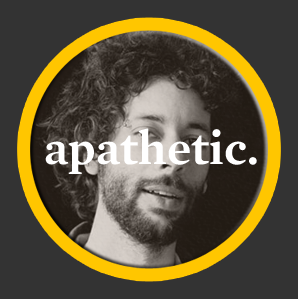
<style>
.page{position:relative;width:298px;height:299px;background:#333333}
.page>*{position:absolute;margin:0}
.t1{font:48px "MercuryTextG1-Semibold";color:#ffffff}
</style>
<div class="page">
<p class="t1" style="left:45px;top:128px;width:212px;height:46px">apathetic.</p>
</div>
